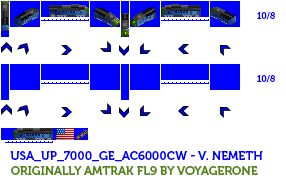
<style>
.page{position:relative;width:286px;height:178px;background:#ffffff}
.page>*{position:absolute;margin:0}
.t1{font:9px "Museo700-Regular";color:#0000ff}
.t2{font:12px "Museo700-Regular";color:#0000ff;text-transform:uppercase}
.t3{font:12px "Museo700-Regular";color:#548414;text-transform:uppercase}
</style>
<div class="page">
<p class="t1" style="left:257px;top:12px;width:18px;height:8px">10/8</p>
<p class="t1" style="left:257px;top:75px;width:18px;height:8px">10/8</p>
<p class="t2" style="left:10px;top:151px;width:253px;height:24px">USA_UP_7000_GE_AC6000CW - V. Nemeth<br><span class="t3">originally Amtrak FL9 by VoyagerOne</span></p>
</div>
